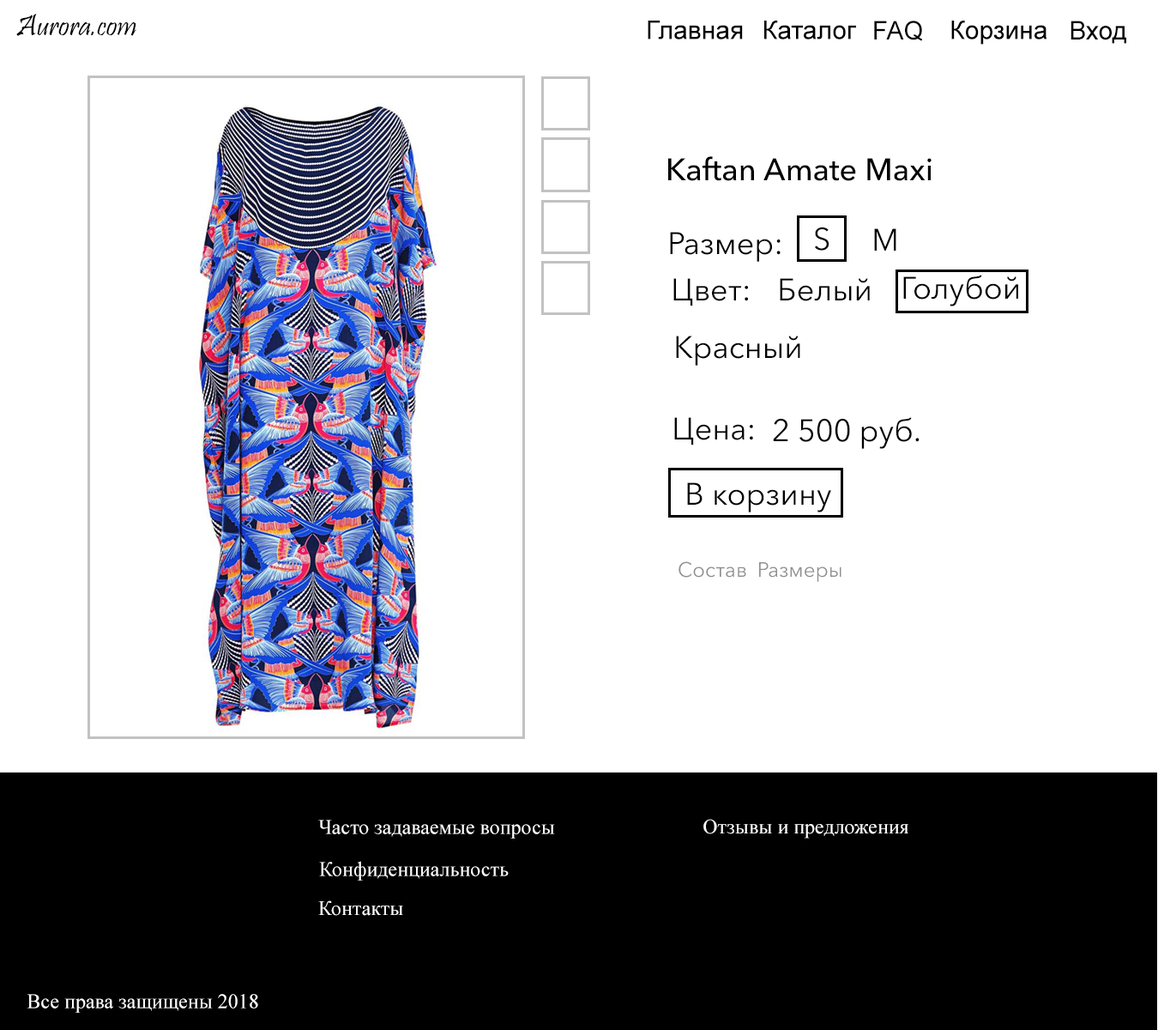
<style>
.page{position:relative;width:1158px;height:1030px;background:#ffffff}
.page>*{position:absolute;margin:0}
.t1{font:30.9px "Pristina-Regular";color:#000000}
.t2{font:25.7px "ArialMT";color:#000000}
.t3{font:30.9px "AvenirNextCyr-Medium";color:#000000}
.t4{font:30.9px "AvenirNextCyr-Regular";color:#000000}
.t5{font:20.6px "AvenirNextCyr-Regular";color:#909090}
.t6{font:20.6px "TimesNewRomanPSMT";color:#fffefe}
</style>
<div class="page">
<p class="t1" style="left:16px;top:14px;width:120px;height:22px">Aurora.com</p>
<p class="t2" style="left:648px;top:21px;width:95px;height:18px">Главная</p>
<p class="t2" style="left:764px;top:21px;width:92px;height:18px">Каталог</p>
<p class="t2" style="left:874px;top:21px;width:49px;height:20px">FAQ</p>
<p class="t2" style="left:951px;top:21px;width:97px;height:24px">Корзина</p>
<p class="t2" style="left:1071px;top:21px;width:55px;height:23px">Вход</p>
<p class="t3" style="left:668px;top:156px;width:264px;height:25px">Kaftan Amate Maxi</p>
<p class="t4" style="left:670px;top:232px;width:111px;height:30px">Размер:</p>
<p class="t4" style="left:814px;top:226px;width:16px;height:25px">S</p>
<p class="t4" style="left:874px;top:228px;width:23px;height:23px">M</p>
<p class="t4" style="left:673px;top:278px;width:75px;height:28px">Цвет:</p>
<p class="t4" style="left:780px;top:278px;width:90px;height:23px">Белый</p>
<p class="t4" style="left:903px;top:275px;width:115px;height:31px">Голубой</p>
<p class="t4" style="left:676px;top:335px;width:124px;height:30px">Красный</p>
<p class="t4" style="left:674px;top:417px;width:79px;height:28px">Цена:</p>
<p class="t4" style="left:773px;top:417px;width:147px;height:32px">2 500 руб.</p>
<p class="t4" style="left:687px;top:482px;width:144px;height:30px">В корзину</p>
<p class="t5" style="left:679px;top:561px;width:163px;height:21px">Состав  Размеры</p>
<p class="t6" style="left:318px;top:819px;width:237px;height:19px">Часто задаваемые вопросы</p>
<p class="t6" style="left:704px;top:818px;width:205px;height:20px">Отзывы и предложения</p>
<p class="t6" style="left:319px;top:861px;width:190px;height:19px">Конфиденциальность</p>
<p class="t6" style="left:318px;top:900px;width:85px;height:15px">Контакты</p>
<p class="t6" style="left:27px;top:994px;width:231px;height:18px">Все права защищены 2018</p>
</div>
